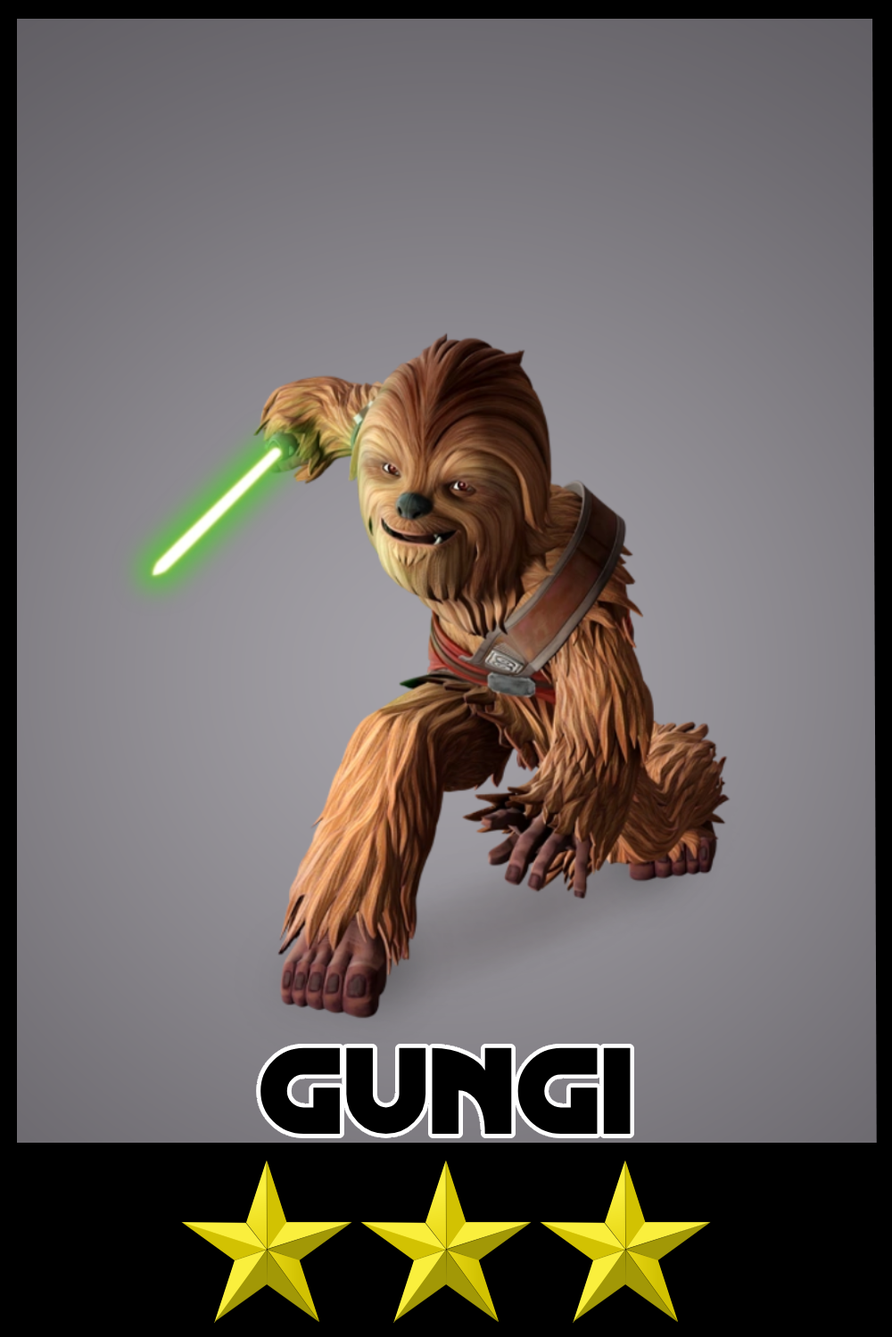
<style>
.page{position:relative;width:892px;height:1337px}
.page>*{position:absolute;margin:0}
.t1{font:131.9px "DistantGalaxy";color:#000000}
</style>
<div class="page">
<p class="t1" style="left:260px;top:1048px;width:370px;height:86px">gungi</p>
</div>
